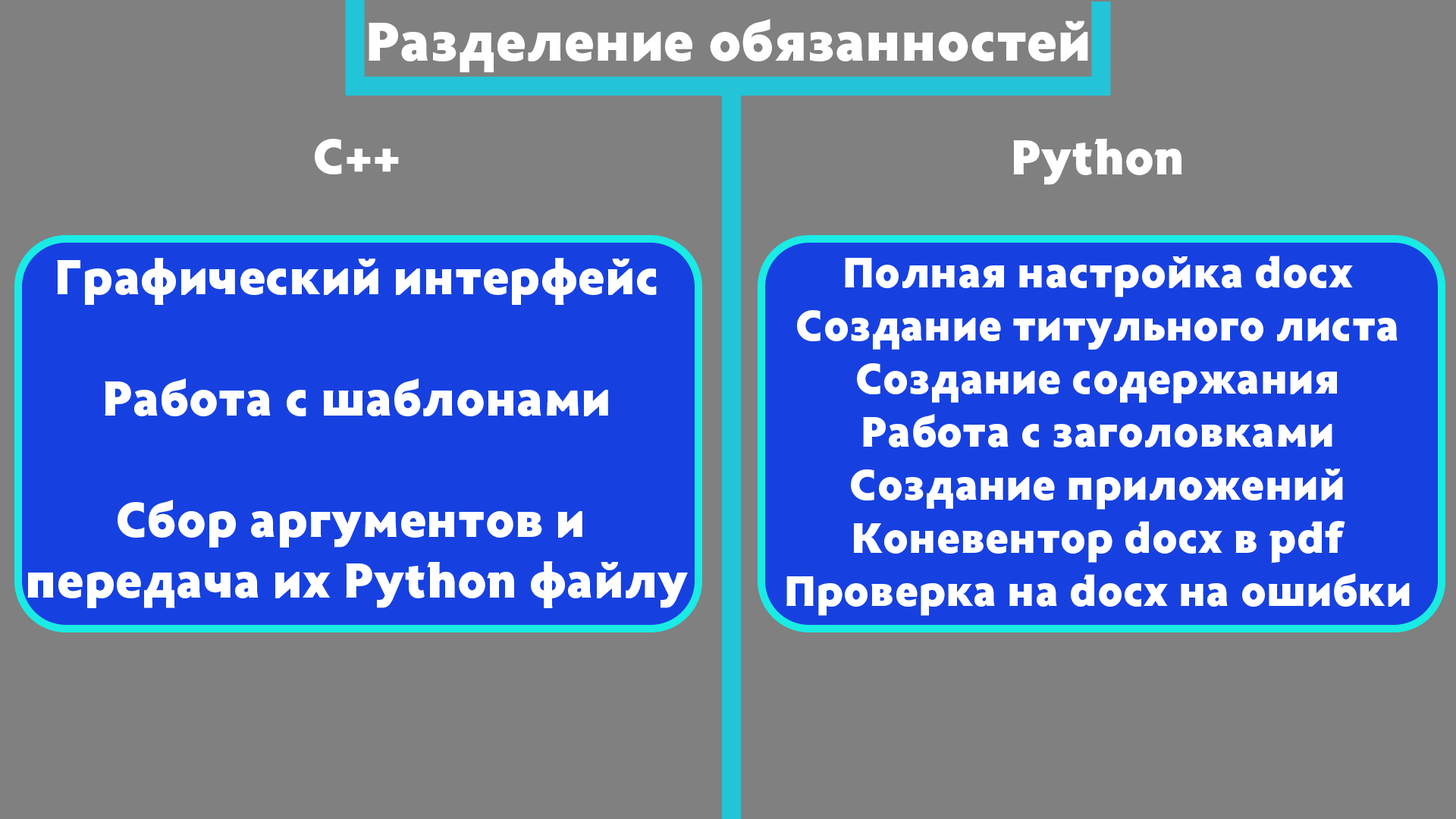
<style>
.page{position:relative;width:1456px;height:819px;background:#808080}
.page>*{position:absolute;margin:0}
.t1{font:56.9px "Radiance-Black";color:#ffffff}
.t2{font:50.6px "Radiance-Black";color:#ffffff}
.t3{font:44.2px "Radiance-Black";color:#ffffff}
</style>
<div class="page">
<p class="t1" style="left:369px;top:19px;width:719px;height:54px">Разделение обязанностей</p>
<p class="t2" style="left:27px;top:139px;width:661px;height:469px;text-align:center">С++<br><br>Графический интерфейс<br><br>Работа с шаблонами<br><br>Сбор аргументов и <br>передача их Python файлу</p>
<p class="t3" style="left:786px;top:139px;width:624px;height:477px;text-align:center"><span class="t2">Python<br><br></span>Полная настройка docx<br>Создание титульного листа<br>Создание содержания<br>Работа с заголовками<br>Создание приложений<br>Коневентор docx в pdf<br>Проверка на docx на ошибки</p>
</div>
